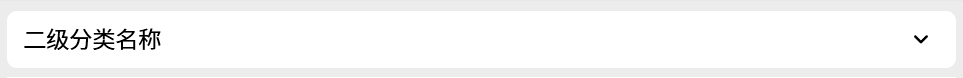
<style>
.page{position:relative;width:963px;height:78px;background:#ffffff}
.page>*{position:absolute;margin:0}
.t1{font:23.3px "SourceHanSansSC-Regular";color:#000000}
</style>
<div class="page">
<p class="t1" style="left:24px;top:28px;width:137px;height:22px">二级分类名称</p>
</div>
